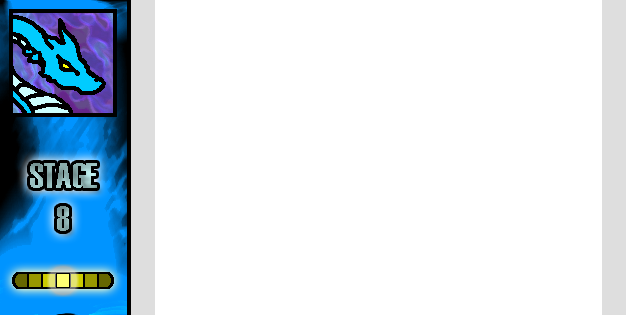
<style>
.page{position:relative;width:626px;height:315px;background:#ffffff}
.page>*{position:absolute;margin:0}
.t1{font:36px "Haettenschweiler"}
</style>
<div class="page">
<p class="t1" style="left:30px;top:163px;width:67px;height:68px;text-align:center">STAGE<br>8</p>
</div>
